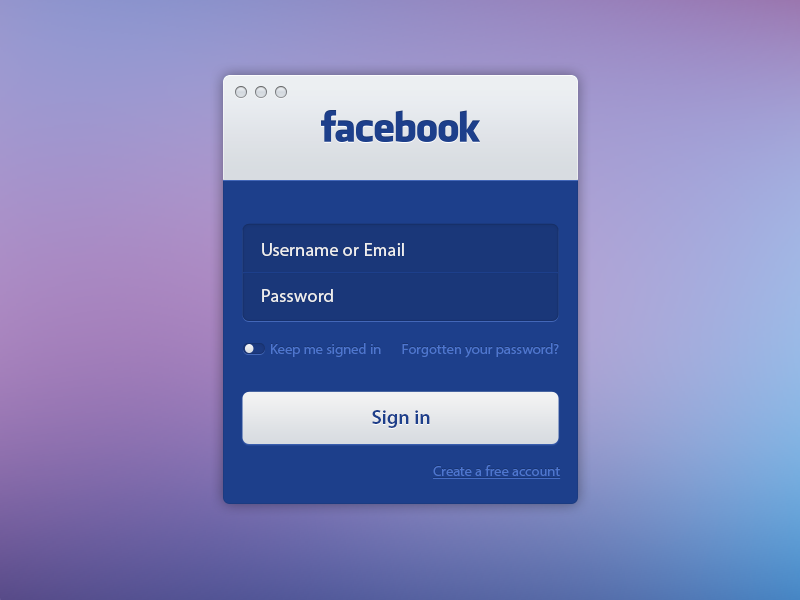
<style>
.page{position:relative;width:800px;height:600px}
.page>*{position:absolute;margin:0}
.t1{font:18px "MyriadPro-Regular";letter-spacing:0.02em;color:#eeeeee}
.t2{font:14.5px "MyriadPro-Regular";letter-spacing:0.005em;color:#4e76cf}
.t3{font:20px "MyriadPro-Semibold";letter-spacing:0.01em;color:#1d3f8b}
.t4{font:14.5px "MyriadPro-Regular";letter-spacing:0.005em;color:#4e76cf;text-decoration:underline}
</style>
<div class="page">
<p class="t1" style="left:262px;top:243px;width:142px;height:13px">Username or Email</p>
<p class="t1" style="left:262px;top:289px;width:71px;height:13px">Password</p>
<p class="t2" style="left:271px;top:343px;width:110px;height:14px">Keep me signed in</p>
<p class="t2" style="left:402px;top:343px;width:157px;height:15px">Forgotten your password?</p>
<p class="t3" style="left:372px;top:410px;width:58px;height:18px">Sign in</p>
<p class="t4" style="left:433px;top:465px;width:128px;height:14px">Create a free account</p>
</div>
